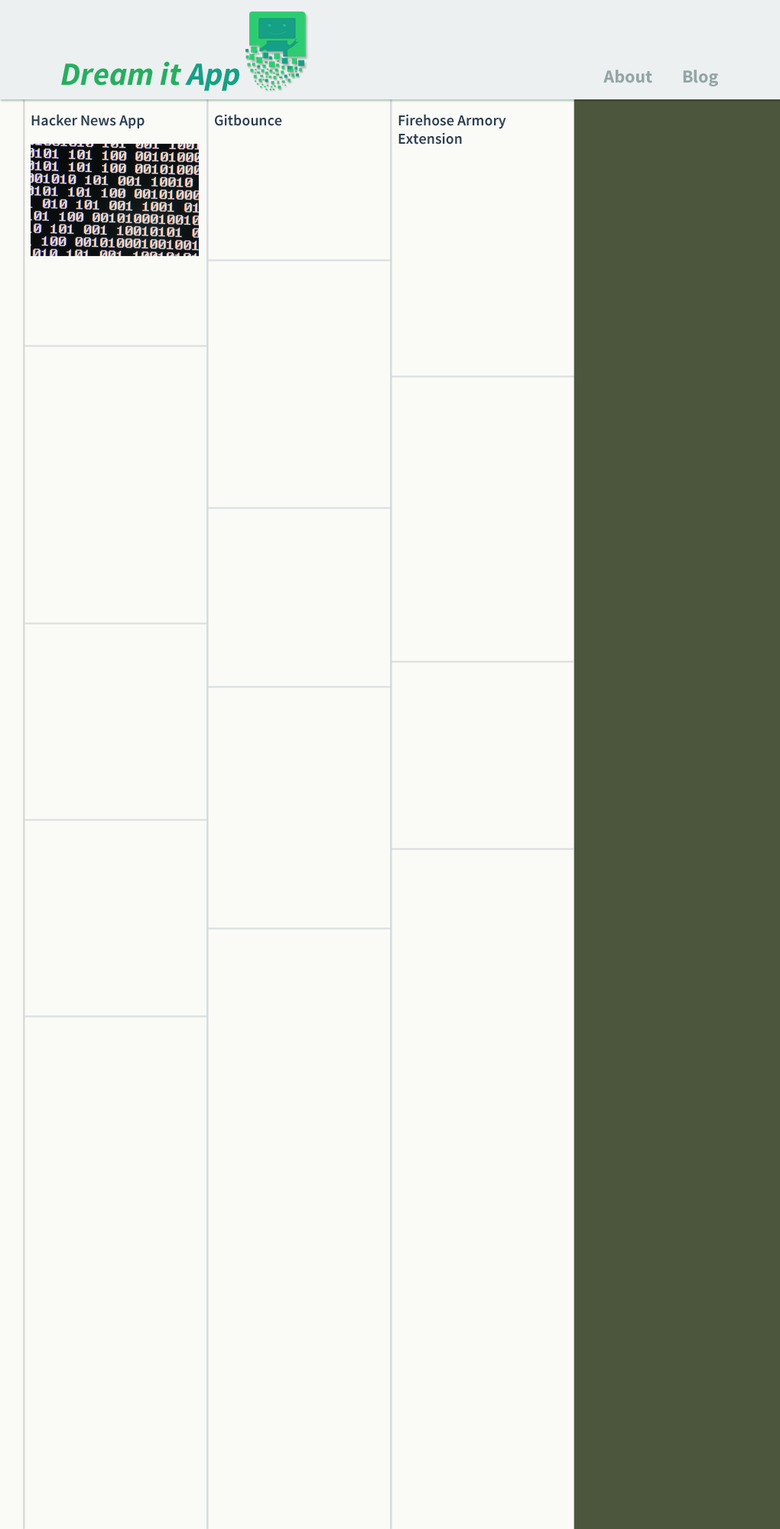
<style>
.page{position:relative;width:780px;height:1529px;background:#fafaf7}
.page>*{position:absolute;margin:0}
.t1{font:32.3px "SourceSansPro-BoldIt";color:#27ae60}
.t2{font:32.3px "SourceSansPro-BoldIt";color:#16a085}
.t3{font:18.3px "SourceSansPro-Bold";color:#95a5a6}
.t4{font:15.3px "SourceSansPro-Semibold";color:#2c3e50}
</style>
<div class="page">
<p class="t1" style="left:61px;top:61px;width:178px;height:30px">Dream it <span class="t2">App</span></p>
<p class="t3" style="left:603px;top:70px;width:49px;height:13px">About</p>
<p class="t3" style="left:683px;top:70px;width:35px;height:16px">Blog</p>
<p class="t4" style="left:31px;top:114px;width:113px;height:14px">Hacker News App</p>
<p class="t4" style="left:215px;top:114px;width:67px;height:12px">Gitbounce</p>
<p class="t4" style="left:398px;top:114px;width:108px;height:30px">Firehose Armory Extension</p>
</div>
